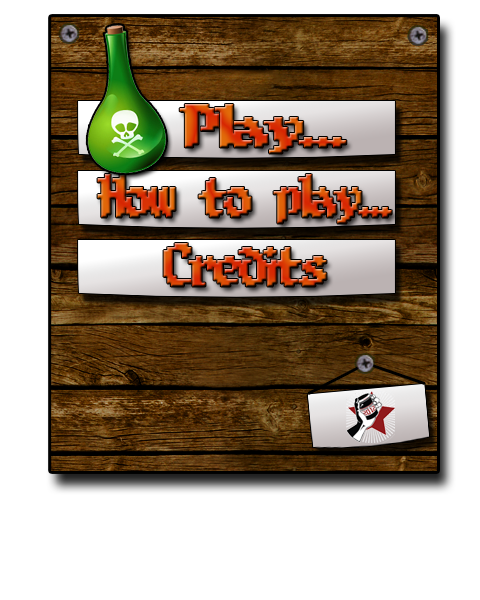
<style>
.page{position:relative;width:480px;height:600px;background:#ffffff}
.page>*{position:absolute;margin:0}
.t1{font:49.3px "8-bitLimit(BRK)";letter-spacing:-0.075em;font-weight:bold;scale:1.6 1}
.t2{font:49.3px "8-bitLimit(BRK)";letter-spacing:-0.075em;font-weight:bold;scale:1.14 1}
</style>
<div class="page">
<p class="t1" style="left:179px;top:104px;width:168px;height:50px">Play...</p>
<p class="t2" style="left:97px;top:174px;width:295px;height:50px">How to play...</p>
<p class="t2" style="left:163px;top:243px;width:164px;height:44px">Credits</p>
</div>
